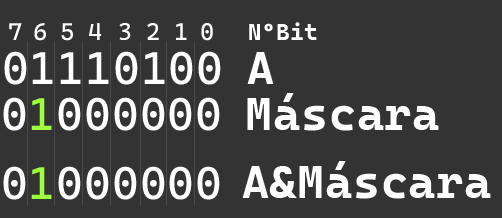
<style>
.page{position:relative;width:502px;height:218px;background:#333333}
.page>*{position:absolute;margin:0}
.t1{font:24.2px "CascadiaCode-Roman";letter-spacing:0.02em;color:#ffffff}
.t2{font:23.3px "CascadiaCodeRoman-Bold";letter-spacing:0.02em;color:#ffffff}
.t3{font:45.8px "CascadiaCode-Roman";letter-spacing:0.02em;color:#ffffff}
.t4{font:45.8px "CascadiaCodeRoman-Bold";letter-spacing:0.02em;color:#ffffff}
.t5{font:45.8px "CascadiaCode-Roman";letter-spacing:0.02em;color:#9dff3d}
</style>
<div class="page">
<p class="t1" style="left:9px;top:23px;width:13px;height:17px">7</p>
<p class="t1" style="left:34px;top:23px;width:12px;height:18px">6</p>
<p class="t1" style="left:61px;top:23px;width:12px;height:18px">5</p>
<p class="t1" style="left:88px;top:23px;width:14px;height:17px">4</p>
<p class="t1" style="left:119px;top:23px;width:12px;height:17px">3</p>
<p class="t1" style="left:147px;top:23px;width:12px;height:17px">2</p>
<p class="t1" style="left:176px;top:23px;width:11px;height:17px">1</p>
<p class="t1" style="left:201px;top:23px;width:12px;height:18px">0</p>
<p class="t2" style="left:249px;top:22px;width:68px;height:18px">NºBit</p>
<p class="t3" style="left:4px;top:51px;width:217px;height:34px">01110100</p>
<p class="t4" style="left:247px;top:52px;width:27px;height:32px">A</p>
<p class="t3" style="left:3px;top:97px;width:217px;height:34px">0<span class="t5">1</span>000000</p>
<p class="t4" style="left:247px;top:93px;width:192px;height:38px">Máscara</p>
<p class="t4" style="left:242px;top:161px;width:249px;height:38px">A&amp;Máscara</p>
<p class="t3" style="left:3px;top:166px;width:217px;height:34px">0<span class="t5">1</span>000000</p>
</div>
